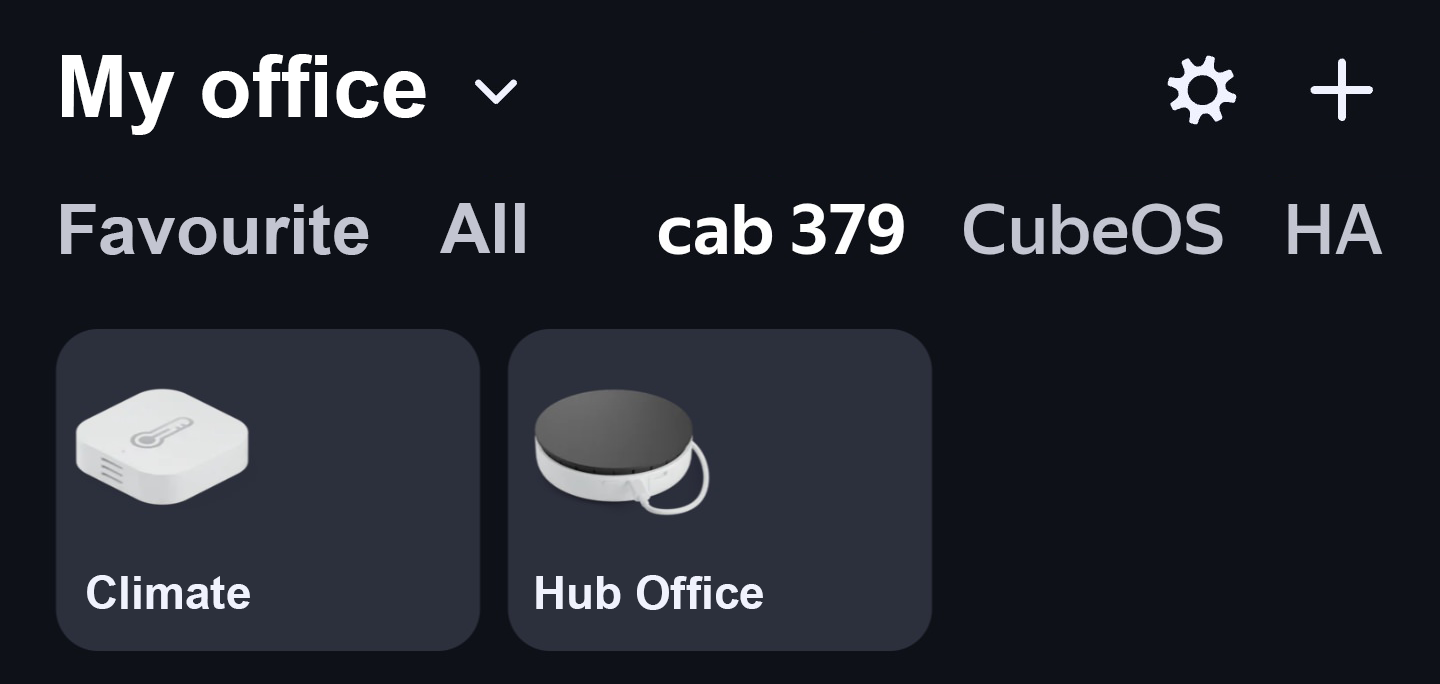
<style>
.page{position:relative;width:1440px;height:684px;background:#0e1118}
.page>*{position:absolute;margin:0}
.t1{font:86px "Arial-BoldMT";color:#ffffff}
.t2{font:70px "Arial-BoldMT";color:#c3c5d1}
.t3{font:46px "Arial-BoldMT";color:#f0f2fd}
</style>
<div class="page">
<p class="t1" style="left:62px;top:54px;width:364px;height:81px">My office</p>
<p class="t2" style="left:61px;top:204px;width:308px;height:51px">Favourite</p>
<p class="t2" style="left:440px;top:203px;width:85px;height:50px">All</p>
<p class="t3" style="left:87px;top:575px;width:163px;height:34px">Climate</p>
<p class="t3" style="left:536px;top:575px;width:227px;height:35px">Hub Office</p>
</div>
